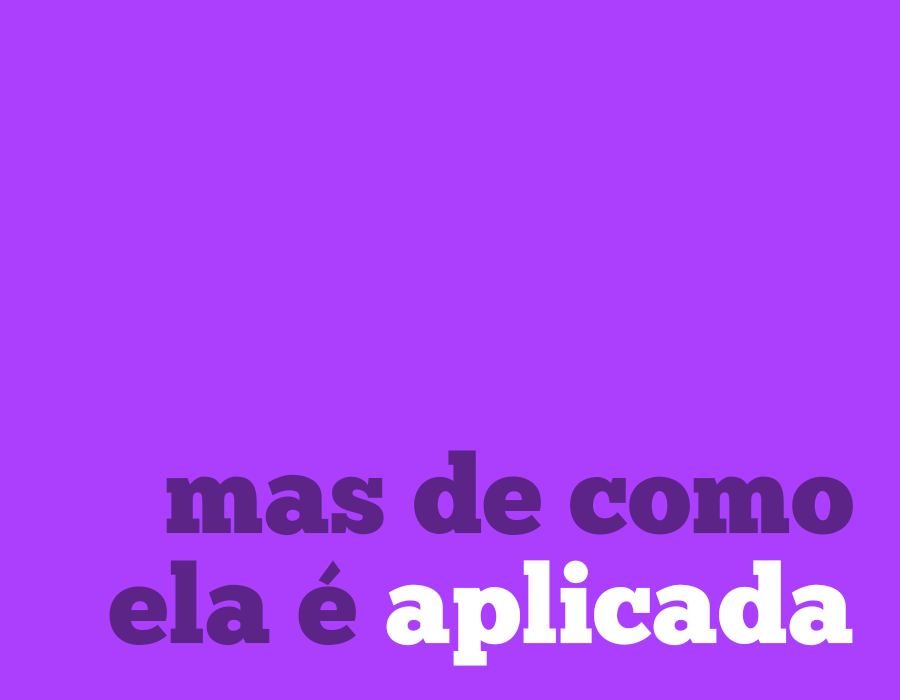
<style>
.page{position:relative;width:900px;height:700px;background:#ac3ffe}
.page>*{position:absolute;margin:0}
.t1{font:110px/110px "ChunkFive-Roman";color:#5d2488}
.t2{font:110px/110px "ChunkFive-Roman";color:#ffffff}
</style>
<div class="page">
<p class="t1" style="left:109px;top:450px;width:744px;height:216px;text-align:right">mas de como<br>ela é <span class="t2">aplicada</span></p>
</div>
